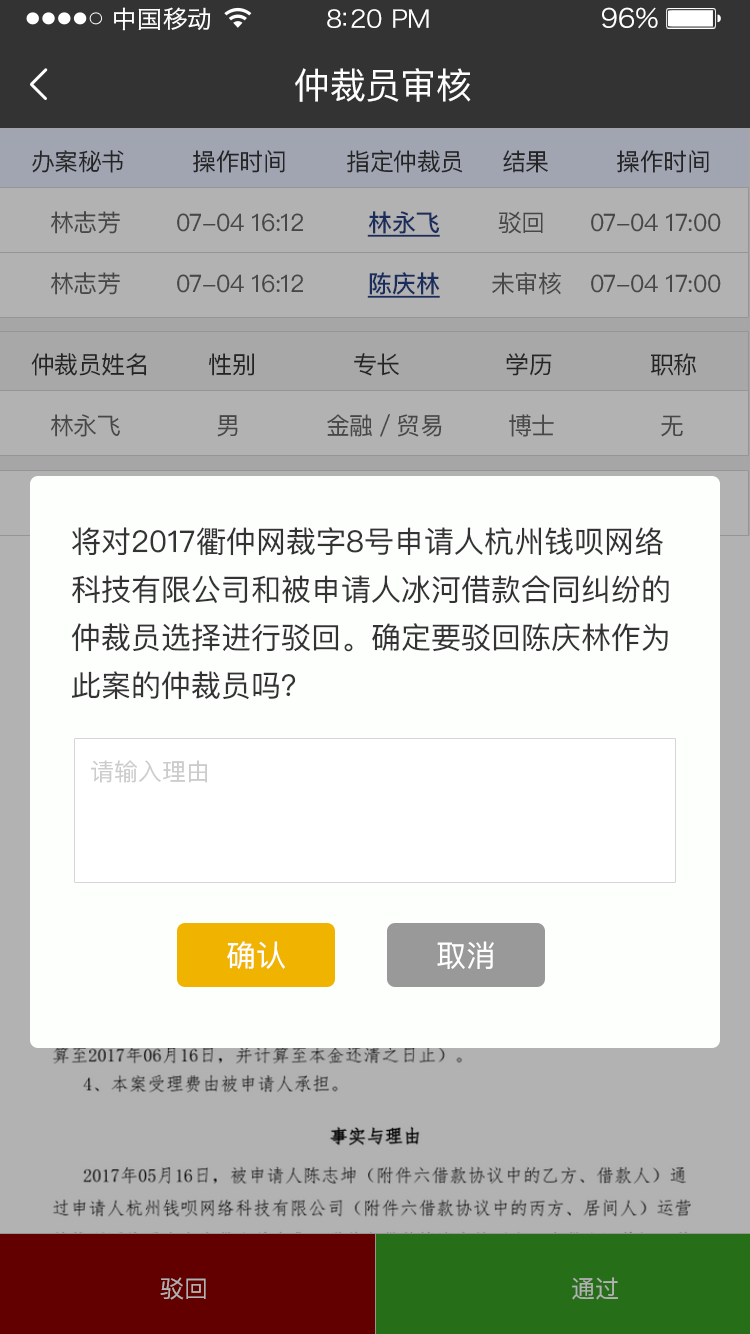
<style>
.page{position:relative;width:750px;height:1334px;background:#b2b2b2}
.page>*{position:absolute;margin:0}
.t1{font:24px "HiraginoSansGB-W3";letter-spacing:0.02em;color:#ffffff;scale:1.03 1}
.t2{font:24px "HiraginoSansGB-W3";letter-spacing:-0.02em;color:#ffffff;scale:1.03 1}
.t3{font:26.2px "HiraginoSansGB-W3";letter-spacing:-0.02em;color:#ffffff;scale:1.03 1}
.t4{font:36px "PingFangSC-Regular";letter-spacing:-0.02em;color:#ffffff}
.t5{font:24px "PingFangSC-Regular";letter-spacing:-0.02em;color:#333333}
.t6{font:24px "PingFangSC-Regular";letter-spacing:-0.02em;color:#474747}
.t7{font:24px "PingFangSC-Medium";color:#1b2d5d;text-decoration:underline}
.t8{font:30px/48px "PingFangSC-Regular";color:#333333}
.t9{font:24px "PingFangSC-Regular";color:#cccccc}
.t10{font:30px "PingFangSC-Regular";color:#ffffff}
.t11{font:24px "PingFangSC-Regular";color:#b2b2b2}
</style>
<div class="page">
<p class="t1" style="left:114px;top:7px;width:97px;height:24px">中国移动</p>
<p class="t2" style="left:327px;top:9px;width:102px;height:19px">8:20 PM</p>
<p class="t3" style="left:602px;top:7px;width:56px;height:22px">96%</p>
<p class="t4" style="left:295px;top:68px;width:176px;height:34px">仲裁员审核</p>
<p class="t5" style="left:32px;top:150px;width:677px;height:23px">办案秘书         操作时间        指定仲裁员     结果         操作时间</p>
<p class="t6" style="left:51px;top:211px;width:69px;height:23px">林志芳</p>
<p class="t6" style="left:177px;top:213px;width:126px;height:19px">07-04 16:12</p>
<p class="t7" style="left:367px;top:211px;width:73px;height:26px">林永飞</p>
<p class="t6" style="left:498px;top:211px;width:45px;height:23px">驳回</p>
<p class="t6" style="left:591px;top:213px;width:130px;height:19px">07-04 17:00</p>
<p class="t6" style="left:51px;top:272px;width:69px;height:23px">林志芳</p>
<p class="t6" style="left:177px;top:274px;width:126px;height:19px">07-04 16:12</p>
<p class="t7" style="left:367px;top:272px;width:73px;height:26px">陈庆林</p>
<p class="t6" style="left:492px;top:272px;width:69px;height:23px">未审核</p>
<p class="t6" style="left:591px;top:274px;width:130px;height:19px">07-04 17:00</p>
<p class="t5" style="left:31px;top:353px;width:665px;height:23px">仲裁员姓名        性别             专长              学历             职称</p>
<p class="t6" style="left:51px;top:414px;width:69px;height:23px">林永飞</p>
<p class="t6" style="left:327px;top:414px;width:115px;height:23px">金融／贸易</p>
<p class="t6" style="left:509px;top:414px;width:45px;height:23px">博士</p>
<p class="t6" style="left:217px;top:415px;width:21px;height:22px">男</p>
<p class="t6" style="left:661px;top:415px;width:22px;height:22px">无</p>
<p class="t8" style="left:71px;top:527px;width:598px;height:173px">将对2017衢仲网裁字8号申请人杭州钱呗网络<br>科技有限公司和被申请人冰河借款合同纠纷的<br>仲裁员选择进行驳回。确定要驳回陈庆林作为<br>此案的仲裁员吗？</p>
<p class="t9" style="left:91px;top:760px;width:116px;height:23px">请输入理由</p>
<p class="t10" style="left:227px;top:941px;width:58px;height:28px">确认</p>
<p class="t10" style="left:437px;top:941px;width:57px;height:29px">取消</p>
<p class="t11" style="left:160px;top:1277px;width:46px;height:23px">驳回</p>
<p class="t11" style="left:572px;top:1277px;width:46px;height:23px">通过</p>
</div>
